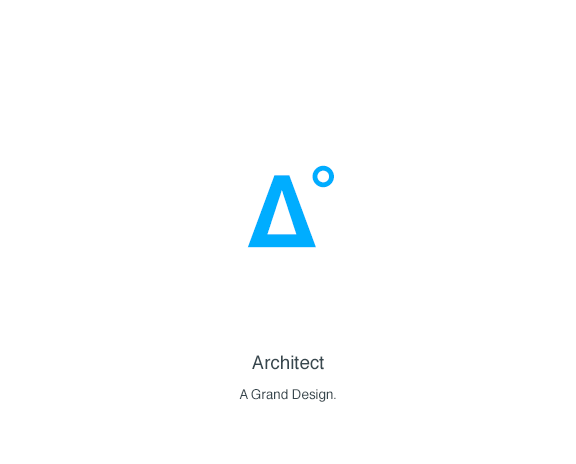
<style>
.page{position:relative;width:576px;height:464px;background:#ffffff}
.page>*{position:absolute;margin:0}
.t1{font:100px "Helvetica-Bold";color:#00adff}
.t2{font:18.7px "Helvetica";color:#37474e}
.t3{font:13.3px "Helvetica";color:#37474e}
</style>
<div class="page">
<p class="t1" style="left:247px;top:165px;width:87px;height:83px">∆˚</p>
<p class="t2" style="left:252px;top:355px;width:72px;height:15px">Architect</p>
<p class="t3" style="left:239px;top:389px;width:97px;height:13px">A Grand Design.</p>
</div>
